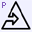
<style>
.page{position:relative;width:32px;height:32px;background:#f0f0ff}
.page>*{position:absolute;margin:0}
.t1{font:9px "MyriadPro-Regular";color:#835dbc}
</style>
<div class="page">
<p class="t1" style="left:2px;top:2px;width:4px;height:6px">P</p>
</div>
